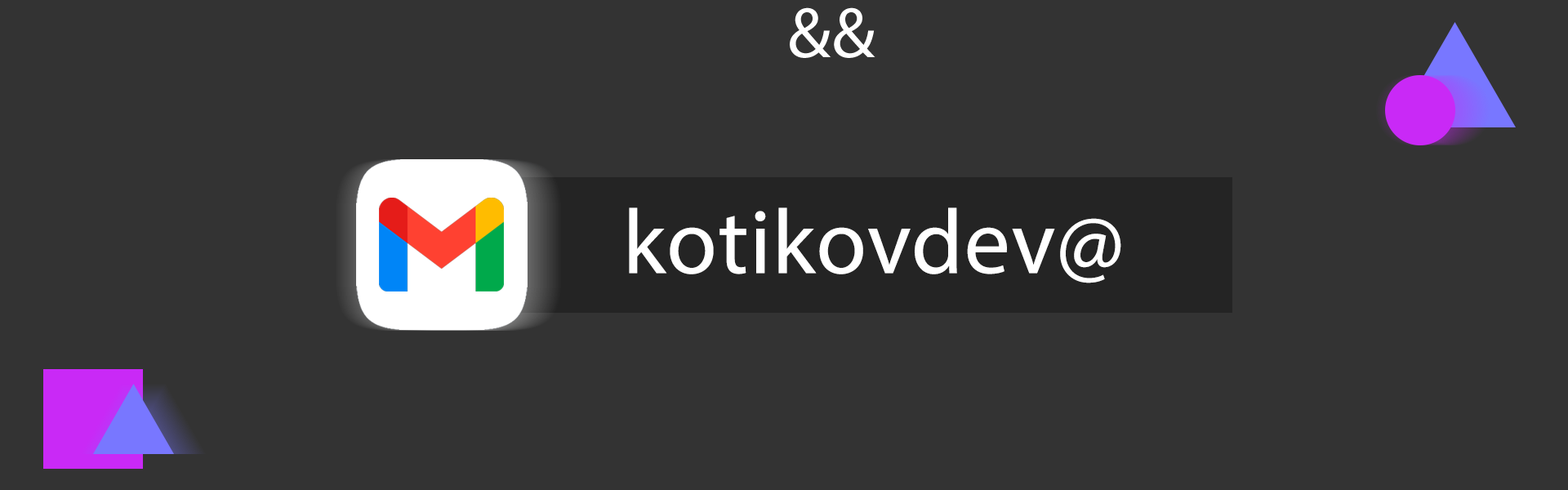
<style>
.page{position:relative;width:1568px;height:490px;background:#333333}
.page>*{position:absolute;margin:0}
.t1{font:71.9px "MyriadPro-Regular";letter-spacing:0.012em;color:#ffffff}
.t2{font:91.7px "MyriadPro-Regular";letter-spacing:0.012em;color:#ffffff}
</style>
<div class="page">
<p class="t1" style="left:790px;top:7px;width:85px;height:51px">&amp;&amp;</p>
<p class="t2" style="left:629px;top:207px;width:492px;height:76px">kotikovdev@</p>
</div>
